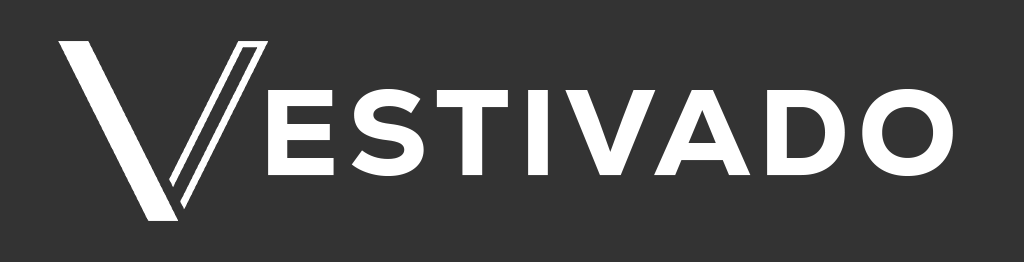
<style>
.page{position:relative;width:1024px;height:262px;background:#333333}
.page>*{position:absolute;margin:0}
.t1{font:120px "Nexa-Heavy";letter-spacing:0.075em;color:#ffffff}
</style>
<div class="page">
<p class="t1" style="left:268px;top:89px;width:685px;height:87px">ESTIVADO</p>
</div>
